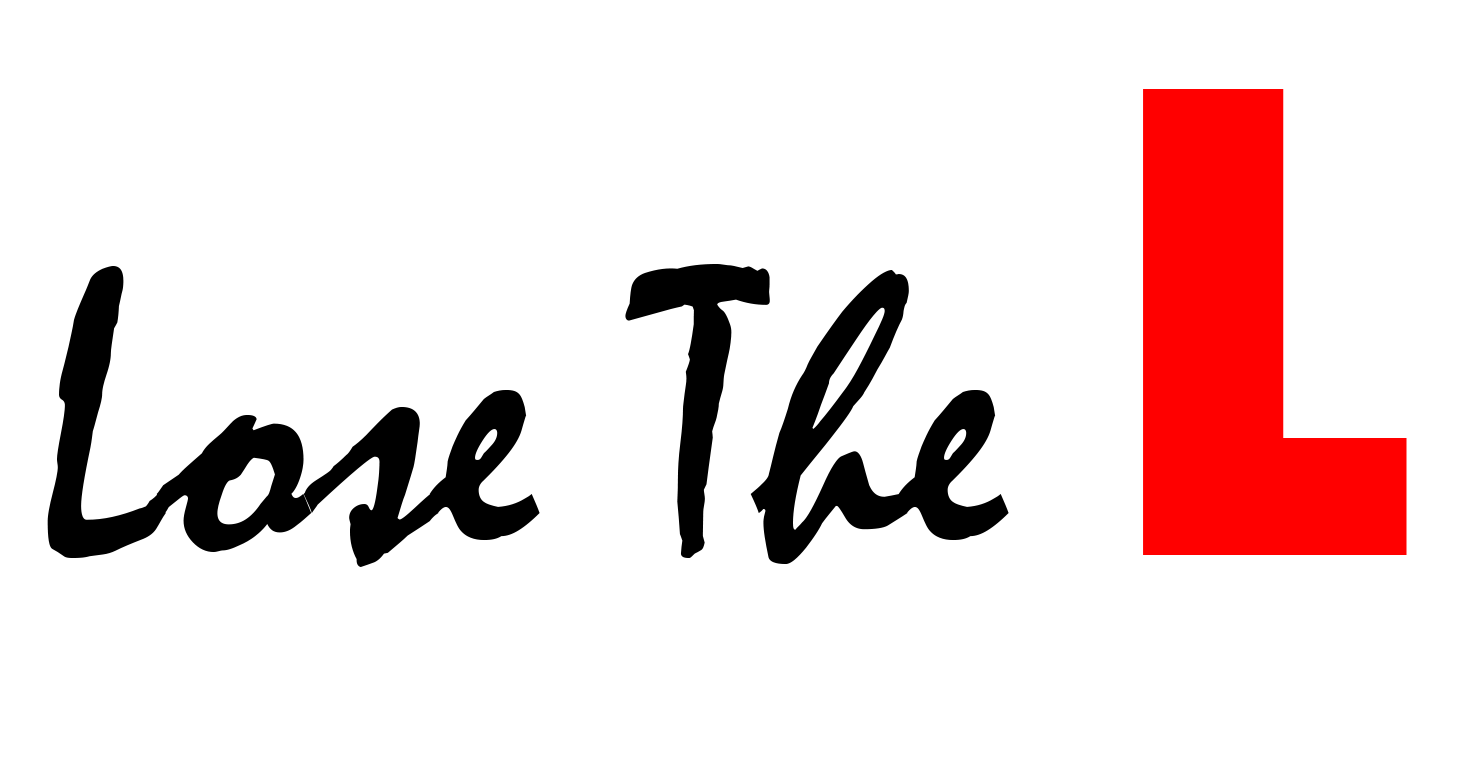
<style>
.page{position:relative;width:1479px;height:775px;background:#ffffff}
.page>*{position:absolute;margin:0}
.t1{font:414.3px "Mistral";color:#000000}
.t2{font:625px "GillSans-UltraBoldCondensed";color:#ff0000}
</style>
<div class="page">
<p class="t1" style="left:47px;top:89px;width:1360px;height:478px">Lose The <span class="t2">L</span></p>
</div>
